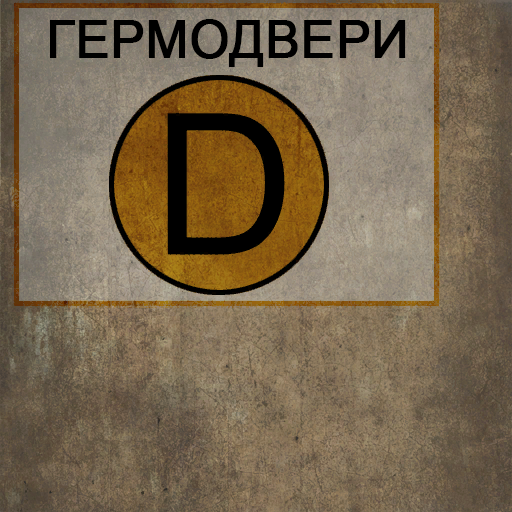
<style>
.page{position:relative;width:512px;height:512px}
.page>*{position:absolute;margin:0}
.t1{font:51px "ArialMT";color:#000000;font-weight:bold}
</style>
<div class="page">
<p class="t1" style="left:50px;top:19px;width:356px;height:48px">ГЕРМОДВЕРИ</p>
</div>
